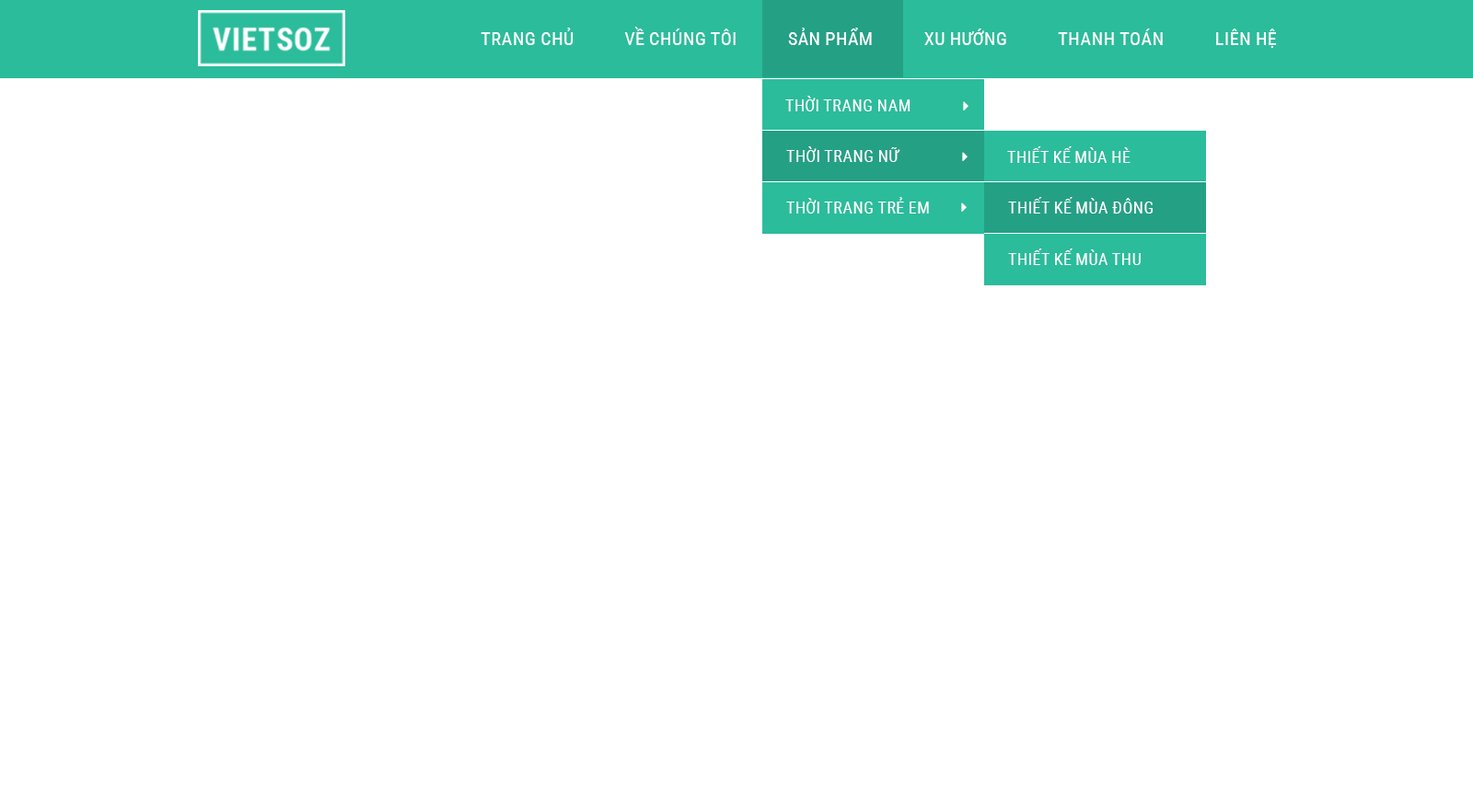
<style>
.page{position:relative;width:1473px;height:809px;background:#ffffff}
.page>*{position:absolute;margin:0}
.t1{font:18.4px "RobotoCondensed-Regular";color:#ffffff;text-transform:uppercase}
.t2{font:16.6px "RobotoCondensed-Regular";color:#ffffff;text-transform:uppercase}
</style>
<div class="page">
<p class="t1" style="left:481px;top:27px;width:796px;height:21px">TRANG CHỦ            vỀ CHÚNG TÔI            SẢN PHẨM            XU HƯỚNG            THANH TOÁN            LIÊN HỆ</p>
<p class="t2" style="left:785px;top:96px;width:126px;height:15px">Thời trang nam</p>
<p class="t2" style="left:786px;top:146px;width:115px;height:16px">Thời trang nữ</p>
<p class="t2" style="left:1007px;top:146px;width:124px;height:17px">Thiết kế Mùa hè</p>
<p class="t2" style="left:786px;top:197px;width:143px;height:17px">Thời trang TRẺ EM</p>
<p class="t2" style="left:1008px;top:197px;width:145px;height:17px">Thiết kế mùa đông</p>
<p class="t2" style="left:1008px;top:249px;width:133px;height:16px">Thiết kế mùa thu</p>
</div>
